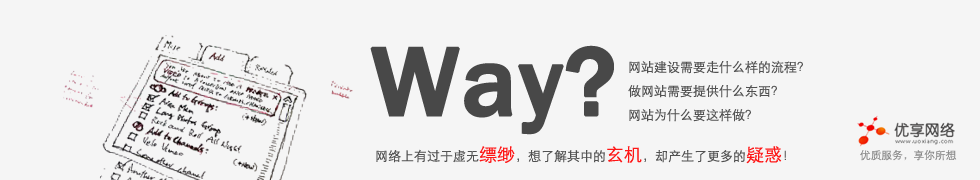
<style>
.page{position:relative;width:980px;height:180px;background:#f5f5f5}
.page>*{position:absolute;margin:0}
.t1{font:100px "FranklinGothic-Medium";color:#484848;font-weight:bold}
.t2{font:13px/24px "STXihei";color:#515151}
.t3{font:13px "STXihei";color:#515151}
.t4{font:18px "STXihei";color:#fe1616}
.t5{font:10.7px "STXihei";color:#898989}
</style>
<div class="page">
<p class="t1" style="left:370px;top:45px;width:244px;height:90px">Way?</p>
<p class="t2" style="left:628px;top:60px;width:175px;height:62px">网站建设需要走什么样的流程？<br>做网站需要提供什么东西？<br>网站为什么要这样做？</p>
<p class="t3" style="left:376px;top:146px;width:410px;height:18px">网络上有过于虚无<span class="t4">缥缈</span>，想了解其中的<span class="t4">玄机</span>，却产生了更多的<span class="t4">疑惑</span>！</p>
<p class="t5" style="left:860px;top:150px;width:97px;height:11px">优质服务，享你所想</p>
</div>
